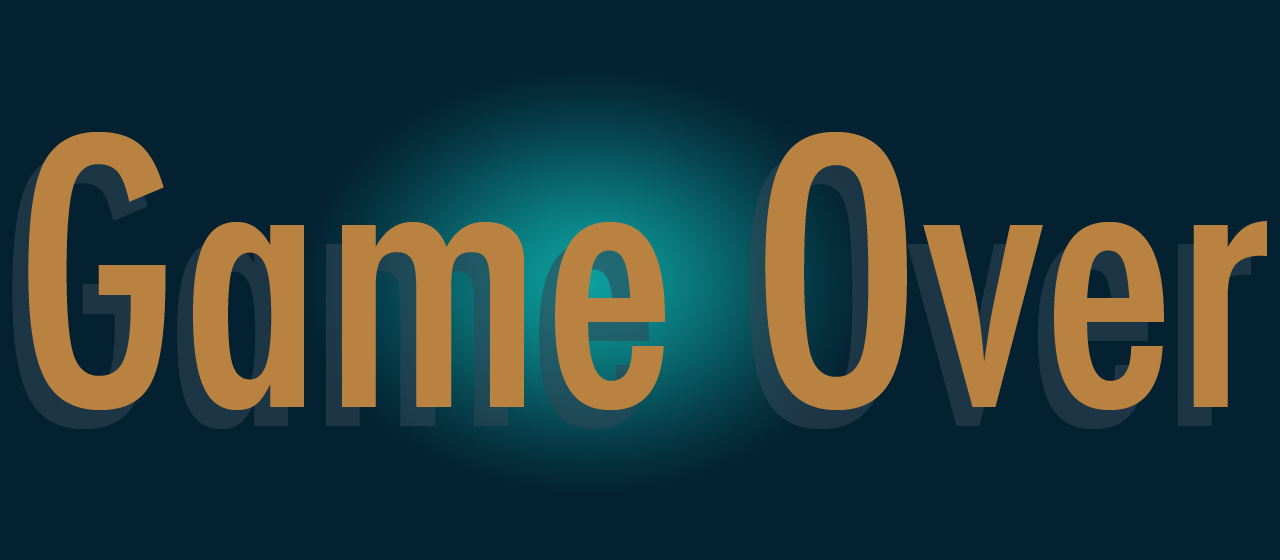
<style>
.page{position:relative;width:1280px;height:560px;background:#042131}
.page>*{position:absolute;margin:0}
.t1{font:360px "Futura-CondensedMedium";color:#b98240}
.t2{font:360px "Futura-CondensedMedium"}
</style>
<div class="page">
<p class="t1" style="left:28px;top:132px;width:1239px;height:278px">Game Over</p>
<p class="t2" style="left:12px;top:151px;width:1239px;height:278px">Game Over</p>
</div>
